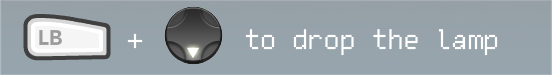
<style>
.page{position:relative;width:552px;height:75px}
.page>*{position:absolute;margin:0}
.t1{font:31.9px "FreePixel-Regular";color:#ffffff}
</style>
<div class="page">
<p class="t1" style="left:245px;top:29px;width:253px;height:27px">to drop the lamp</p>
<p class="t1" style="left:127px;top:33px;width:16px;height:16px">+</p>
</div>
